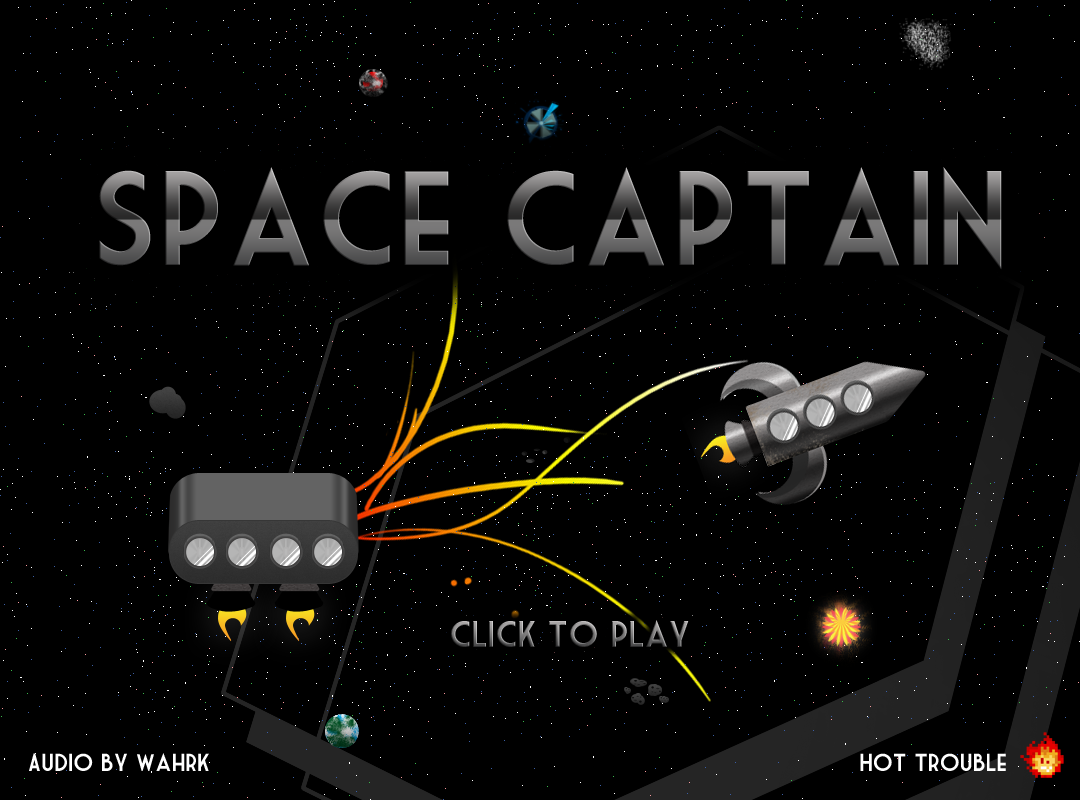
<style>
.page{position:relative;width:1080px;height:800px;background:#000000}
.page>*{position:absolute;margin:0}
.t1{font:130px "MarketDeco"}
.t2{font:36px "MarketDeco";letter-spacing:-0.02em}
.t3{font:24px "MarketDeco";letter-spacing:-0.02em;color:#ffffff}
</style>
<div class="page">
<p class="t1" style="left:99px;top:167px;width:903px;height:103px">Space Captain</p>
<p class="t2" style="left:451px;top:620px;width:238px;height:27px">click to play</p>
<p class="t3" style="left:29px;top:753px;width:180px;height:18px">Audio by Wahrk</p>
<p class="t3" style="left:860px;top:753px;width:146px;height:18px">Hot Trouble</p>
</div>
